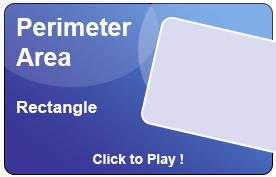
<style>
.page{position:relative;width:276px;height:177px;background:#dadbf1}
.page>*{position:absolute;margin:0}
.t1{font:25px "Arial-BoldMT";color:#ffffff}
.t2{font:17px "Arial-BoldMT";color:#ffffff}
.t3{font:14px "Arial-BoldMT";color:#ffffff}
</style>
<div class="page">
<p class="t1" style="left:16px;top:18px;width:116px;height:48px">Perimeter <br>Area</p>
<p class="t2" style="left:17px;top:101px;width:80px;height:15px">Rectangle</p>
<p class="t3" style="left:93px;top:154px;width:90px;height:13px">Click to Play !</p>
</div>
